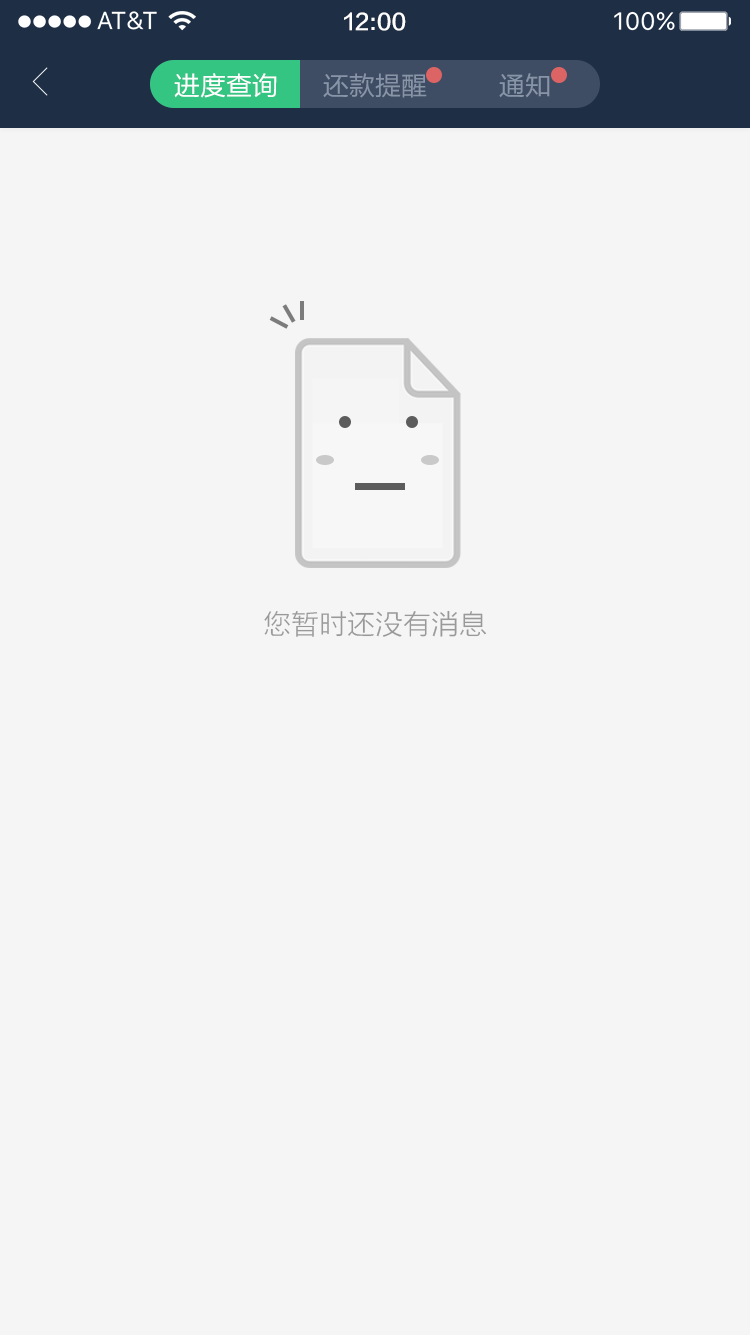
<style>
.page{position:relative;width:750px;height:1335px;background:#f5f5f5}
.page>*{position:absolute;margin:0}
.t1{font:22px "FZLTZHK--GBK1-0";color:#ffffff}
.t2{font:26px "FZLTHJW--GB1-0";color:#ffffff}
.t3{font:26px "FZLTHJW--GB1-0";color:#8895a8}
.t4{font:28px "FZLTXHK";color:#999999}
</style>
<div class="page">
<p class="t1" style="left:344px;top:12px;width:62px;height:19px">12:00</p>
<p class="t2" style="left:174px;top:73px;width:103px;height:25px">进度查询</p>
<p class="t3" style="left:323px;top:73px;width:104px;height:25px">还款提醒</p>
<p class="t3" style="left:499px;top:73px;width:51px;height:25px">通知</p>
<p class="t4" style="left:264px;top:610px;width:223px;height:27px">您暂时还没有消息</p>
</div>
